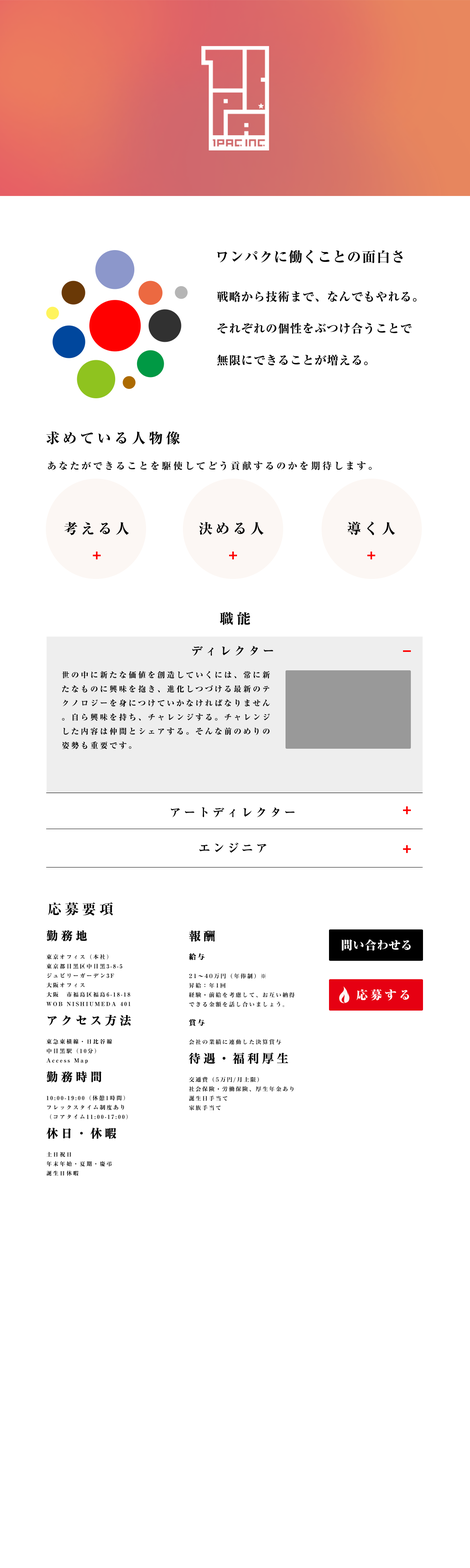
<style>
.page{position:relative;width:470px;height:1568px;background:#ffffff}
.page>*{position:absolute;margin:0}
.t1{font:14.1px "RyuminPro-ExBold";letter-spacing:0.04em;color:#000000}
.t2{font:11.8px/31.8px "RyuminPro-ExBold";letter-spacing:0.04em;color:#000000}
.t3{font:14.1px "RyuminPro-ExBold";letter-spacing:0.22em;color:#000000}
.t4{font:9.4px "RyuminPro-ExBold";letter-spacing:0.22em;color:#000000}
.t5{font:11.8px "RyuminPro-ExBold";letter-spacing:0.22em;color:#000000}
.t6{font:7.8px/14.1px "RyuminPro-ExBold";letter-spacing:0.22em;color:#000000}
.t7{font:5.5px/9.4px "RyuminPro-ExBold";letter-spacing:0.22em;color:#000000}
.t8{font:11.8px/9.4px "RyuminPro-ExBold";letter-spacing:0.22em;color:#000000;font-weight:bold}
.t9{font:5.5px/9.4px "HiraMinStdN-W6";letter-spacing:0.22em;color:#000000}
.t10{font:11.8px/9.4px "HiraMinStdN-W6";letter-spacing:0.22em;color:#000000;font-weight:bold}
.t11{font:7.1px/9.4px "HiraMinStdN-W6";letter-spacing:0.22em;color:#000000;font-weight:bold}
.t12{font:11.8px "RyuminPro-ExHeavy";letter-spacing:0.02em;color:#ffffff}
.t13{font:11.8px "RyuminPro-ExHeavy";letter-spacing:0.22em;color:#ffffff}
</style>
<div class="page">
<p class="t1" style="left:217px;top:250px;width:186px;height:13px">ワンパクに働くことの面白さ</p>
<p class="t2" style="left:217px;top:291px;width:200px;height:75px">戦略から技術まで、なんでもやれる。<br>それぞれの個性をぶつけ合うことで<br>無限にできることが増える。</p>
<p class="t3" style="left:46px;top:431px;width:134px;height:14px">求めている人物像</p>
<p class="t4" style="left:48px;top:461px;width:324px;height:9px">あなたができることを駆使してどう貢献するのかを期待します。</p>
<p class="t3" style="left:64px;top:522px;width:65px;height:13px">考える人</p>
<p class="t3" style="left:199px;top:522px;width:65px;height:13px">決める人</p>
<p class="t3" style="left:348px;top:521px;width:48px;height:14px">導く人</p>
<p class="t3" style="left:220px;top:612px;width:30px;height:13px">職能</p>
<p class="t5" style="left:192px;top:646px;width:82px;height:10px">ディレクター</p>
<p class="t6" style="left:62px;top:671px;width:208px;height:79px">世の中に新たな価値を創造していくには、常に新たなものに興味を抱き、進化しつづける最新のテクノロジーを身につけていかなければなりません。自ら興味を持ち、チャレンジする。チャレンジした内容は仲間とシェアする。そんな前のめりの姿勢も重要です。</p>
<p class="t5" style="left:171px;top:807px;width:124px;height:10px">アートディレクター</p>
<p class="t5" style="left:200px;top:843px;width:67px;height:10px">エンジニア</p>
<p class="t3" style="left:48px;top:902px;width:65px;height:14px">応募要項</p>
<p class="t7" style="left:46px;top:930px;width:85px;height:246px"><span class="t8">勤務地<br><br></span>東京オフィス（本社）<br>東京都目黒区中目黒3-8-5<br>ジュビリーガーデン3F<br>大阪オフィス<br>大阪　市福島区福島6-18-18<br>WOB NISHIUMEDA 401<br><br><span class="t8">アクセス方法<br></span><br>東急東横線・日比谷線<br>中目黒駅（10分）<br>Access Map<br><br><span class="t8">勤務時間<br></span><br>10:00-19:00（休憩1時間）<br>フレックスタイム制度あり<br>（コアタイム11:00-17:00）<br><br><span class="t8">休日・休暇<br></span><br>土日祝日<br>年末年始・夏期・慶弔<br>誕生日休暇</p>
<p class="t9" style="left:189px;top:930px;width:106px;height:181px"><span class="t10">報酬<br></span><span class="t11"><br>給与<br><br></span>21～40万円（年俸制）※<br>昇給：年1回<br>経験・前給を考慮して、お互い納得できる金額を話し合いましょう。<br><br><span class="t11">賞与<br><br></span>会社の業績に連動した決算賞与<br><br><span class="t10">待遇・福利厚生<br></span><br>交通費（5万円/月上限）<br>社会保険・労働保険、厚生年金あり<br>誕生日手当て<br>家族手当て</p>
<p class="t12" style="left:342px;top:939px;width:69px;height:12px">問い合わせる</p>
<p class="t13" style="left:357px;top:989px;width:53px;height:12px">応募する</p>
</div>
